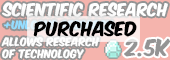
<style>
.page{position:relative;width:170px;height:60px}
.page>*{position:absolute;margin:0}
.t1{font:15px "KomikaAxis";color:#ffffff}
.t2{font:17px "KomikaAxis";color:#000000}
.t3{font:10px "KomikaAxis";color:#ffffff}
.t4{font:20.1px "KomikaAxis";color:#949494}
</style>
<div class="page">
<p class="t1" style="left:2px;top:2px;width:166px;height:15px">scientific research</p>
<p class="t2" style="left:33px;top:20px;width:104px;height:17px">Purchased</p>
<p class="t3" style="left:1px;top:37px;width:99px;height:22px">allows research<br>of technology</p>
<p class="t4" style="left:124px;top:38px;width:46px;height:19px">2.5k</p>
</div>
